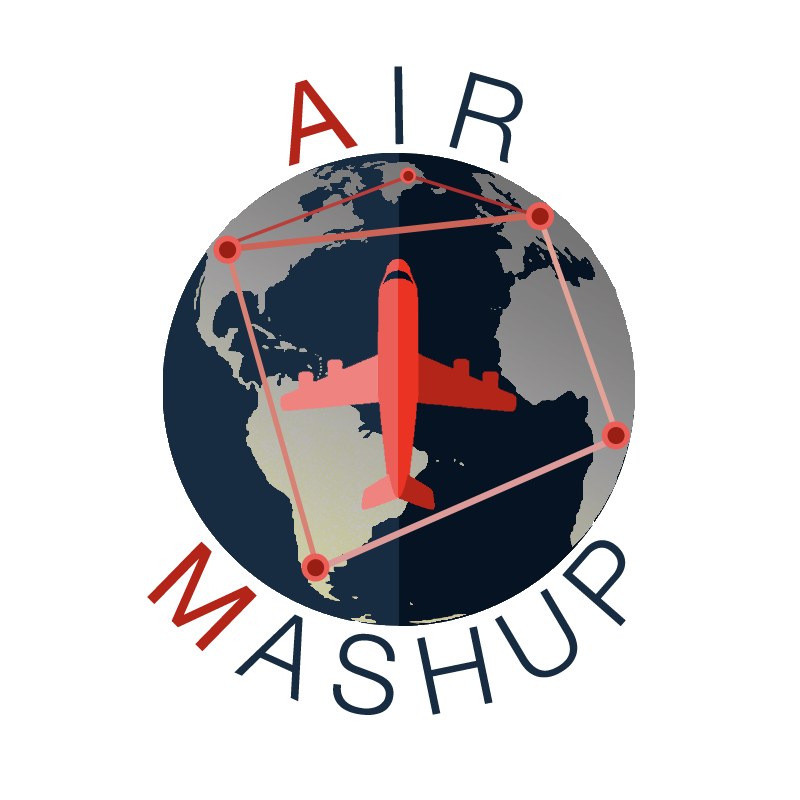
<style>
.page{position:relative;width:800px;height:800px;background:#ffffff}
.page>*{position:absolute;margin:0}
.t1{font:108.3px "HelveticaNeue-Light";color:#172c40}
.t2{font:108.3px "HelveticaNeue";color:#b42519}
</style>
<div class="page">
<p class="t1" style="left:289px;top:66px;width:234px;height:100px"><span class="t2"> A </span>I R</p>
<p class="t1" style="left:147px;top:540px;width:479px;height:175px"><span class="t2">M </span>A S H U P</p>
</div>
